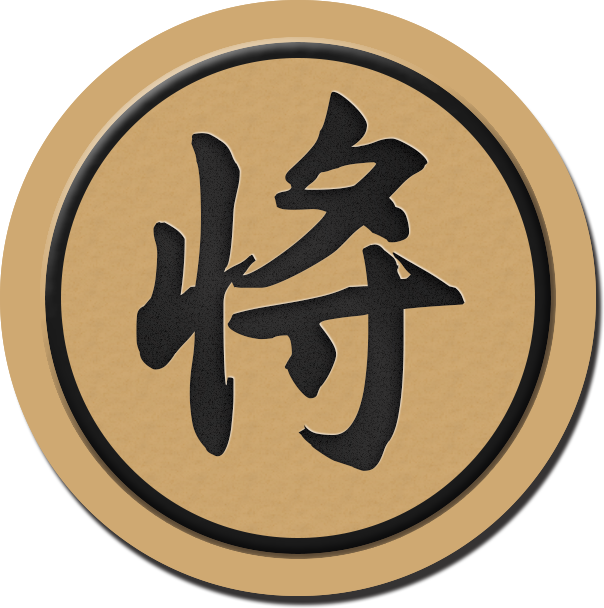
<style>
.page{position:relative;width:604px;height:608px;background:#ffffff}
.page>*{position:absolute;margin:0}
.t1{font:416.7px "AaYuwenlaoshidezi";letter-spacing:0.04em;color:#1b1b1b}
</style>
<div class="page">
<p class="t1" style="left:136px;top:91px;width:329px;height:380px">将</p>
<p class="t1" style="left:136px;top:91px;width:329px;height:380px">将</p>
<p class="t1" style="left:136px;top:91px;width:329px;height:380px">将</p>
<p class="t1" style="left:136px;top:91px;width:329px;height:380px">将</p>
<p class="t1" style="left:136px;top:91px;width:329px;height:380px">将</p>
</div>
